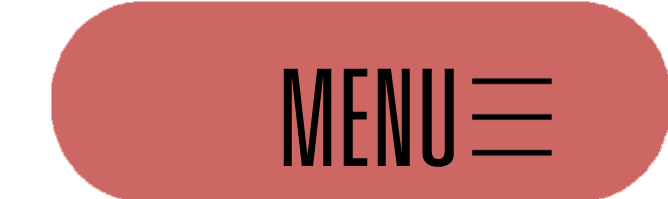
<style>
.page{position:relative;width:668px;height:199px;background:#cd6763}
.page>*{position:absolute;margin:0}
.t1{font:133.3px "NovaLightUltraSSiLightUltraCondensed";color:#000000}
</style>
<div class="page">
<p class="t1" style="left:283px;top:68px;width:171px;height:99px">MENU</p>
</div>
